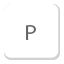
<style>
.page{position:relative;width:64px;height:64px;background:#ffffff}
.page>*{position:absolute;margin:0}
.t1{font:22.4px "MyriadPro-Regular";letter-spacing:-0.025em;color:#61696b}
</style>
<div class="page">
<p class="t1" style="left:26px;top:25px;width:10px;height:15px">P</p>
</div>
